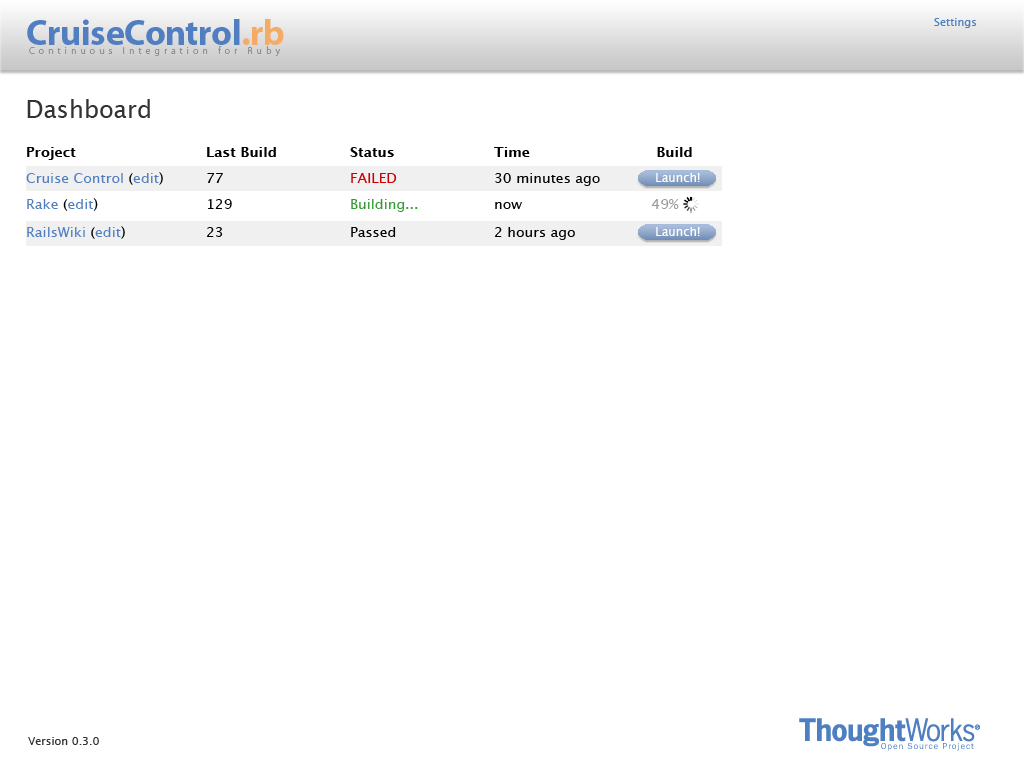
<style>
.page{position:relative;width:1024px;height:768px;background:#ffffff}
.page>*{position:absolute;margin:0}
.t1{font:36px "MyriadPro-Bold";letter-spacing:-0.01em;color:#507ec0}
.t2{font:36px "MyriadPro-Bold";letter-spacing:-0.01em;color:#f3ac66}
.t3{font:11px "LucidaGrande";color:#507ec0}
.t4{font:10px "MyriadPro-Light";letter-spacing:0.409em;color:#8a8a8a}
.t5{font:24px "LucidaGrande";color:#333333}
.t6{font:14px "LucidaGrande-Bold";color:#000000}
.t7{font:14px "LucidaGrande";color:#507ec0}
.t8{font:14px "LucidaGrande";color:#000000}
.t9{font:14px "LucidaGrande";color:#cc0000}
.t10{font:12px "LucidaGrande";color:#ffffff}
.t11{font:14px "LucidaGrande";color:#339933}
.t12{font:14px "LucidaGrande";color:#999999}
.t13{font:11px "LucidaGrande";color:#333333}
</style>
<div class="page">
<p class="t1" style="left:27px;top:19px;width:257px;height:26px">CruiseControl<span class="t2">.rb</span></p>
<p class="t3" style="left:934px;top:18px;width:43px;height:10px">Settings</p>
<p class="t4" style="left:29px;top:46px;width:251px;height:11px">Continuous Integration for Ruby</p>
<p class="t5" style="left:27px;top:99px;width:123px;height:19px">Dashboard</p>
<p class="t6" style="left:27px;top:147px;width:665px;height:13px">Project    Last Build   Status   Time        Build</p>
<p class="t7" style="left:26px;top:172px;width:574px;height:14px">Cruise Control<span class="t8"> (</span>edit<span class="t8">)  77    </span><span class="t9">FAILED</span><span class="t8">   30 minutes ago</span></p>
<p class="t10" style="left:656px;top:173px;width:44px;height:9px">Launch!</p>
<p class="t11" style="left:27px;top:198px;width:652px;height:14px"><span class="t7">Rake</span><span class="t8"> (</span><span class="t7">edit</span><span class="t8">)   129    </span>Building...<span class="t8">   now       </span><span class="t12">49%</span></p>
<p class="t8" style="left:27px;top:226px;width:548px;height:14px"><span class="t7">RailsWiki</span> (<span class="t7">edit</span>)   23    Passed   2 hours ago</p>
<p class="t10" style="left:656px;top:227px;width:44px;height:9px">Launch!</p>
<p class="t13" style="left:28px;top:737px;width:71px;height:8px">Version 0.3.0</p>
</div>
